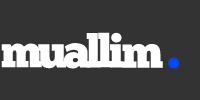
<style>
.page{position:relative;width:200px;height:100px;background:#333333}
.page>*{position:absolute;margin:0}
.t1{font:45.8px "ChunkFive-Regular";letter-spacing:-0.02em;color:#ffffff}
.t2{font:45.8px "ChunkFive-Regular";letter-spacing:-0.02em;color:#0048ff}
</style>
<div class="page">
<p class="t1" style="left:86px;top:33px;width:15px;height:35px">l</p>
<p class="t1" style="left:98px;top:32px;width:14px;height:36px">l</p>
<p class="t1" style="left:110px;top:32px;width:13px;height:36px">i</p>
<p class="t1" style="left:1px;top:43px;width:41px;height:25px">m</p>
<p class="t1" style="left:38px;top:44px;width:28px;height:25px">u</p>
<p class="t1" style="left:63px;top:43px;width:28px;height:26px">a</p>
<p class="t1" style="left:122px;top:44px;width:41px;height:24px">m</p>
<p class="t2" style="left:168px;top:57px;width:11px;height:12px">.</p>
</div>
